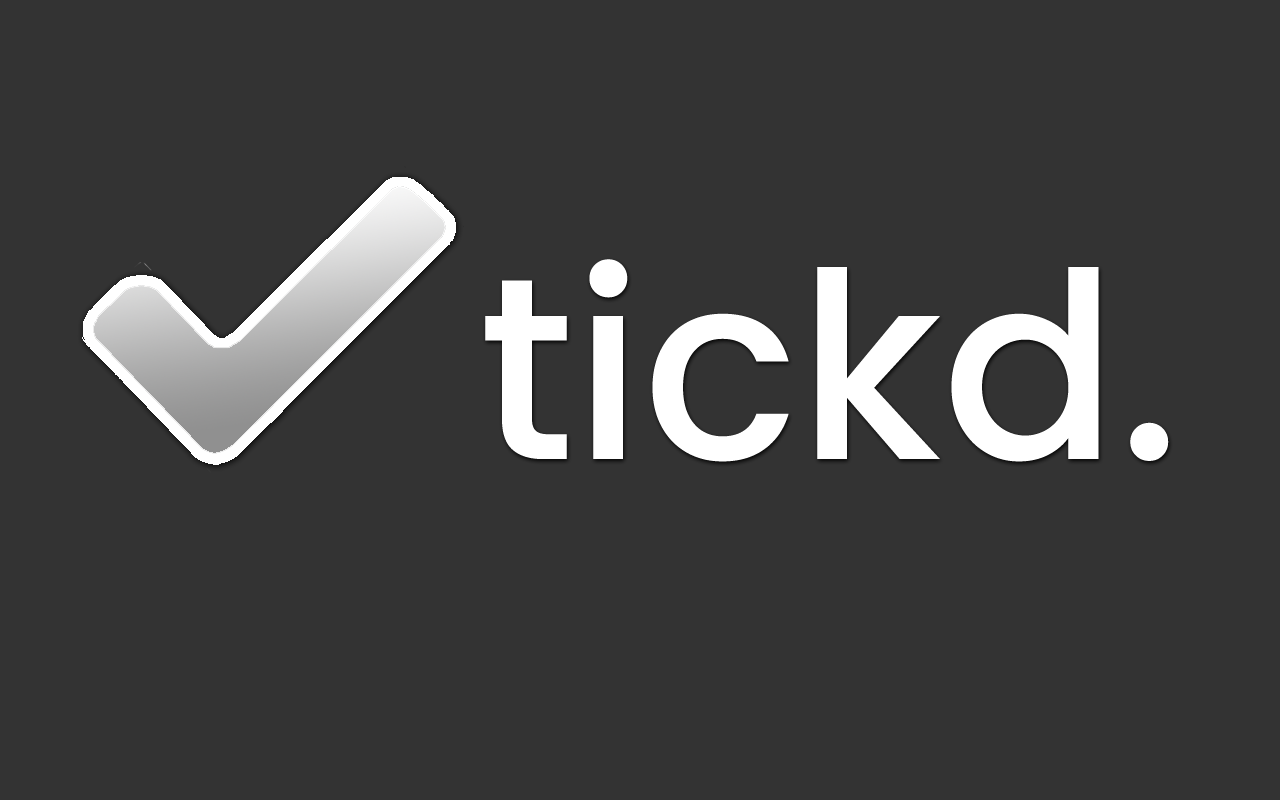
<style>
.page{position:relative;width:1280px;height:800px;background:#333333}
.page>*{position:absolute;margin:0}
.t1{font:259.2px "Poppins-Medium";color:#ffffff}
</style>
<div class="page">
<p class="t1" style="left:485px;top:259px;width:684px;height:203px">tickd.</p>
</div>
